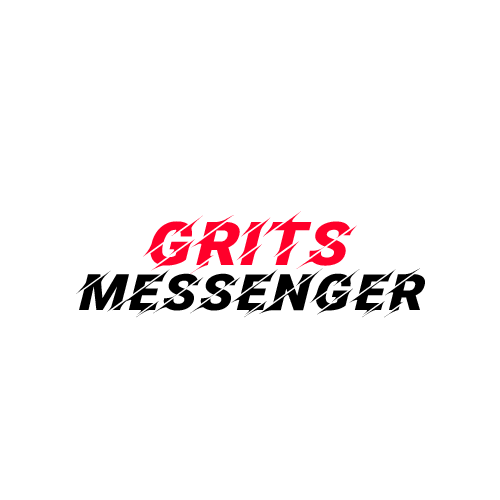
<style>
.page{position:relative;width:500px;height:500px;background:#ffffff}
.page>*{position:absolute;margin:0}
.t1{font:60px "Facon";color:#ff002a}
.t2{font:50px "Facon";color:#000000}
</style>
<div class="page">
<p class="t1" style="left:143px;top:211px;width:214px;height:63px">grits</p>
<p class="t2" style="left:76px;top:268px;width:349px;height:50px">messenger</p>
</div>
